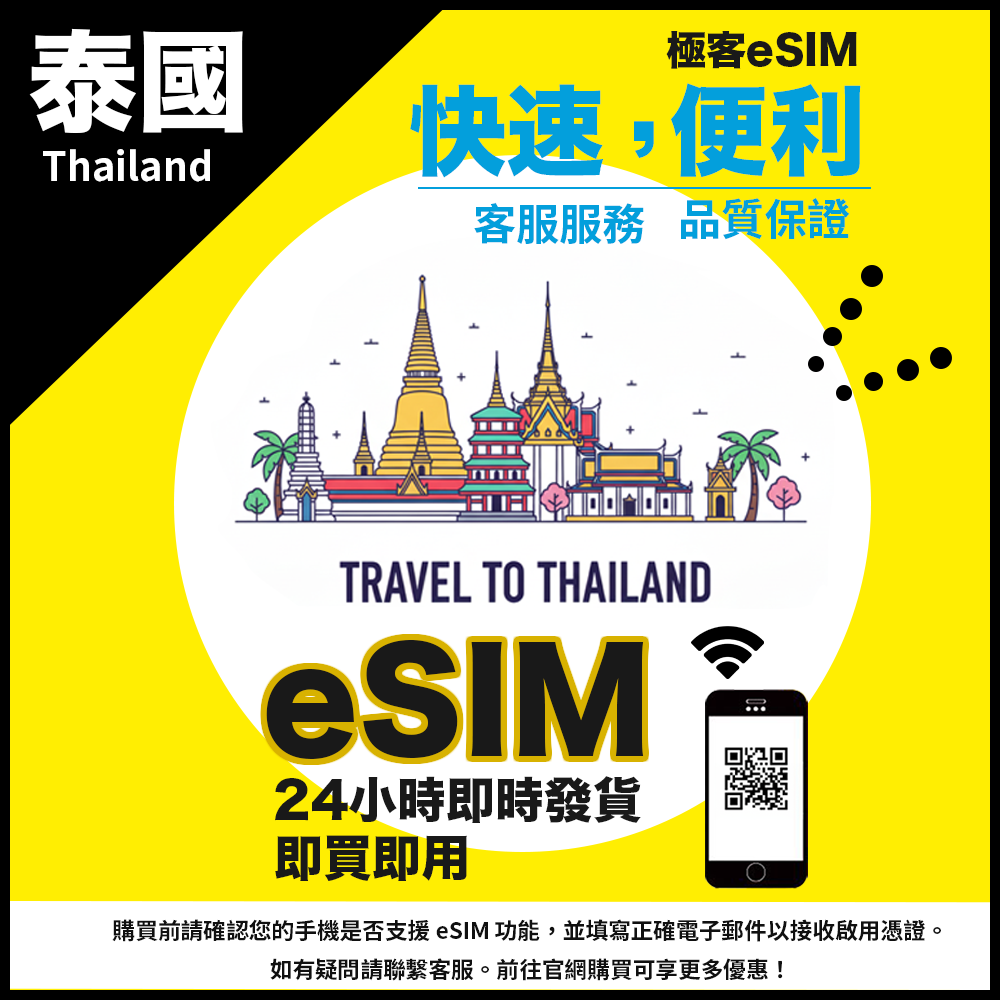
<style>
.page{position:relative;width:1000px;height:1000px;background:#ffee02}
.page>*{position:absolute;margin:0}
.t1{font:109.8px "HiraKakuStdN-W8";color:#ffffff}
.t2{font:40.1px "HiraKakuStdN-W8";color:#191919}
.t3{font:98.2px "HiraKakuStdN-W8";color:#039fdc}
.t4{font:39.3px "SourceHanSansTC-Bold";color:#ffffff}
.t5{font:43.1px "SourceHanSansTC-Bold";color:#039fdc}
.t6{font:137.6px "HiraKakuStdN-W8";color:#191919}
.t7{font:48.9px "HiraKakuStdN-W8";color:#191919}
.t8{font:22.7px "SourceHanSansTC-Bold";color:#101010}
</style>
<div class="page">
<p class="t1" style="left:29px;top:28px;width:214px;height:106px">泰國</p>
<p class="t2" style="left:666px;top:31px;width:191px;height:38px">極客eSIM</p>
<p class="t3" style="left:410px;top:83px;width:451px;height:95px">快速  便利</p>
<p class="t3" style="left:634px;top:121px;width:20px;height:37px">,</p>
<p class="t4" style="left:43px;top:149px;width:167px;height:33px">Thailand</p>
<p class="t5" style="left:681px;top:198px;width:169px;height:42px">品質保證</p>
<p class="t5" style="left:474px;top:202px;width:171px;height:42px">客服服務</p>
<p class="t6" style="left:266px;top:639px;width:378px;height:120px">eSIM</p>
<p class="t7" style="left:275px;top:776px;width:366px;height:47px">24小時即時發貨</p>
<p class="t7" style="left:275px;top:835px;width:192px;height:46px">即買即用</p>
<p class="t8" style="left:112px;top:919px;width:829px;height:62px;text-align:center">購買前請確認您的手機是否支援 eSIM 功能，並填寫正確電子郵件以接收啟用憑證。<br>如有疑問請聯繫客服。前往官網購買可享更多優惠！</p>
</div>
